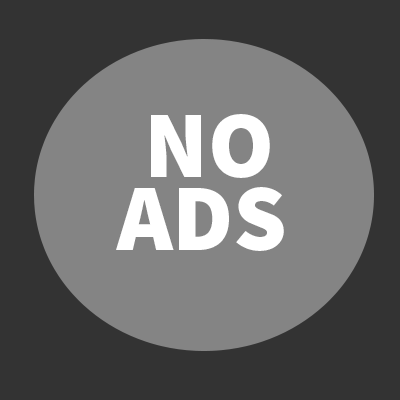
<style>
.page{position:relative;width:400px;height:400px;background:#333333}
.page>*{position:absolute;margin:0}
.t1{font:95.3px "SourceSansPro-Black";color:#ffffff}
</style>
<div class="page">
<p class="t1" style="left:151px;top:114px;width:119px;height:64px">NO</p>
<p class="t1" style="left:116px;top:187px;width:168px;height:64px">ADS</p>
</div>
